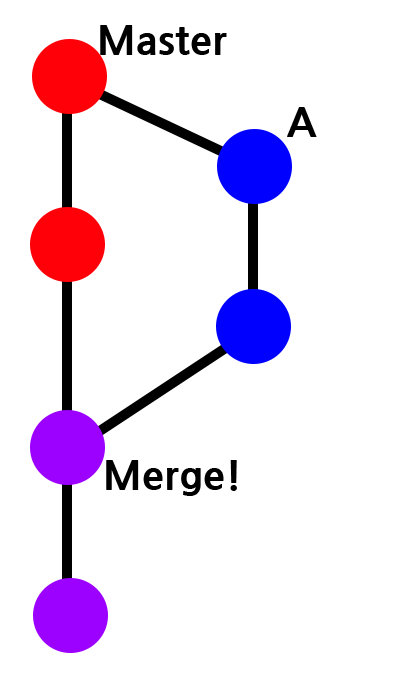
<style>
.page{position:relative;width:400px;height:700px;background:#ffffff}
.page>*{position:absolute;margin:0}
.t1{font:40px "NanumGothicExtraBold";color:#000000}
</style>
<div class="page">
<p class="t1" style="left:100px;top:25px;width:127px;height:30px">Master</p>
<p class="t1" style="left:287px;top:107px;width:30px;height:30px">A</p>
<p class="t1" style="left:106px;top:460px;width:131px;height:36px">Merge!</p>
</div>
